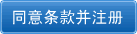
<style>
.page{position:relative;width:137px;height:34px}
.page>*{position:absolute;margin:0}
.t1{font:16px "SimHei";color:#ffffff}
</style>
<div class="page">
<p class="t1" style="left:13px;top:9px;width:110px;height:16px">同意条款并注册</p>
</div>
